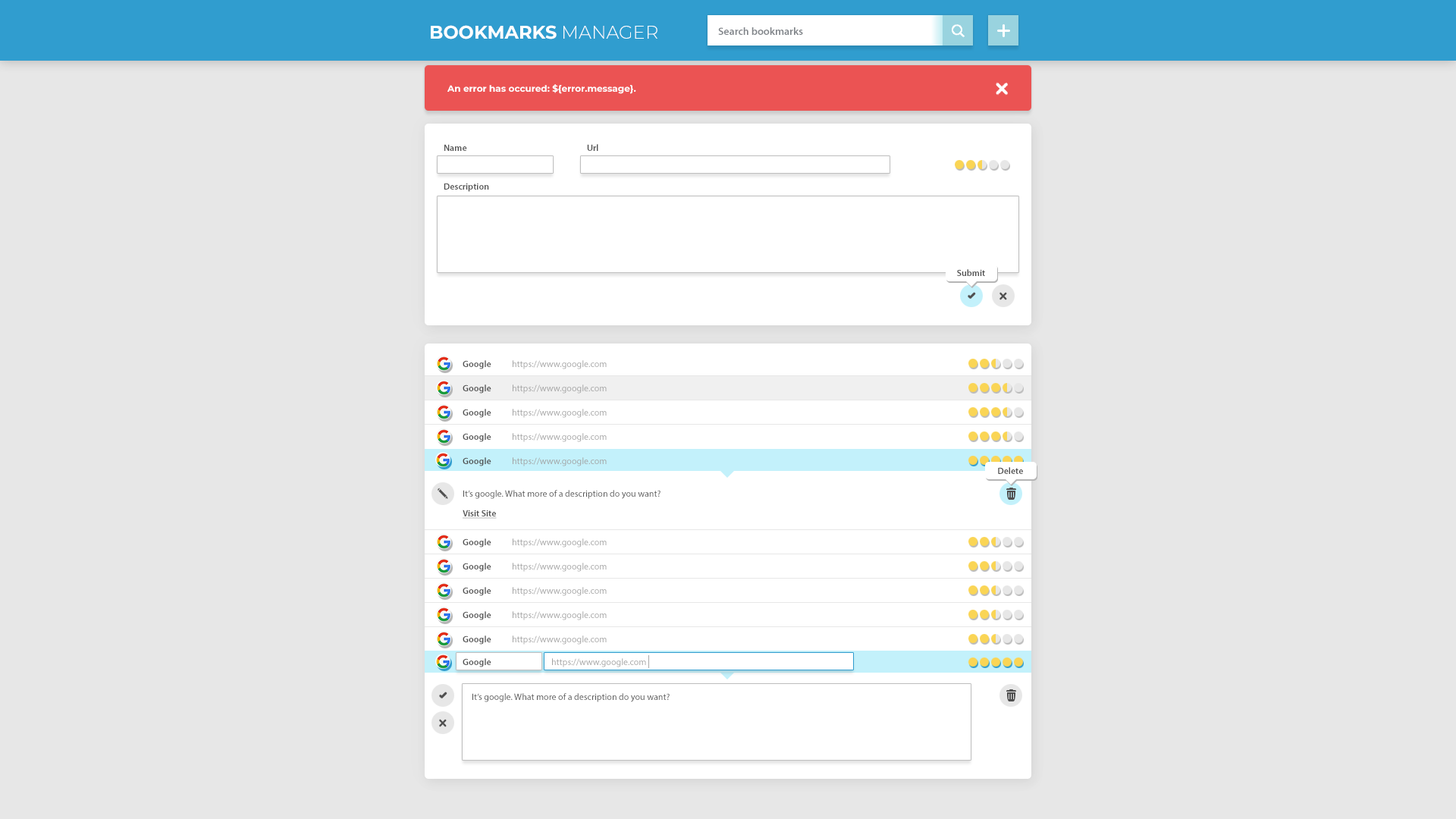
<style>
.page{position:relative;width:1456px;height:819px;background:#e7e7e7}
.page>*{position:absolute;margin:0}
.t1{font:18.2px "Montserrat-Bold";color:#ffffff;text-transform:uppercase}
.t2{font:18.2px "Montserrat-Light";color:#ffffff;text-transform:uppercase}
.t3{font:10.6px "MyriadPro-Semibold";color:#81858a}
.t4{font:9.1px "Montserrat-Bold";color:#ffffff}
.t5{font:9.1px "MyriadPro-Semibold";color:#4f4f4f}
.t6{font:9.1px "MyriadPro-Regular";color:#a2a2a2}
.t7{font:9.1px/19.7px "MyriadPro-Regular";color:#4f4f4f}
.t8{font:9.1px/19.7px "MyriadPro-Semibold";color:#4f4f4f;text-decoration:underline}
.t9{font:9.1px "MyriadPro-Regular";color:#4f4f4f}
</style>
<div class="page">
<p class="t1" style="left:431px;top:25px;width:226px;height:14px">Bookmarks <span class="t2">Manager</span></p>
<p class="t3" style="left:718px;top:27px;width:85px;height:8px">Search bookmarks</p>
<p class="t4" style="left:447px;top:84px;width:189px;height:10px">An error has occured: ${error.message}.</p>
<p class="t5" style="left:444px;top:144px;width:23px;height:7px">Name</p>
<p class="t5" style="left:587px;top:144px;width:11px;height:7px">Url</p>
<p class="t5" style="left:444px;top:183px;width:45px;height:9px">Description</p>
<p class="t5" style="left:957px;top:269px;width:28px;height:7px">Submit</p>
<p class="t5" style="left:463px;top:360px;width:28px;height:9px">Google</p>
<p class="t6" style="left:513px;top:360px;width:94px;height:9px">https://www.google.com</p>
<p class="t5" style="left:463px;top:384px;width:28px;height:10px">Google</p>
<p class="t6" style="left:513px;top:384px;width:94px;height:10px">https://www.google.com</p>
<p class="t5" style="left:463px;top:409px;width:28px;height:9px">Google</p>
<p class="t6" style="left:513px;top:409px;width:94px;height:9px">https://www.google.com</p>
<p class="t5" style="left:463px;top:433px;width:28px;height:9px">Google</p>
<p class="t6" style="left:513px;top:433px;width:94px;height:9px">https://www.google.com</p>
<p class="t5" style="left:463px;top:457px;width:28px;height:9px">Google</p>
<p class="t6" style="left:513px;top:457px;width:94px;height:9px">https://www.google.com</p>
<p class="t5" style="left:998px;top:467px;width:25px;height:7px">Delete</p>
<p class="t7" style="left:463px;top:490px;width:197px;height:29px">It’s google. What more of a description do you want?<br><span class="t8">Visit Site</span></p>
<p class="t5" style="left:463px;top:538px;width:28px;height:10px">Google</p>
<p class="t6" style="left:513px;top:538px;width:94px;height:10px">https://www.google.com</p>
<p class="t5" style="left:463px;top:563px;width:28px;height:9px">Google</p>
<p class="t6" style="left:513px;top:563px;width:94px;height:9px">https://www.google.com</p>
<p class="t5" style="left:463px;top:587px;width:28px;height:9px">Google</p>
<p class="t6" style="left:513px;top:587px;width:94px;height:9px">https://www.google.com</p>
<p class="t5" style="left:463px;top:611px;width:28px;height:9px">Google</p>
<p class="t6" style="left:513px;top:611px;width:94px;height:9px">https://www.google.com</p>
<p class="t5" style="left:463px;top:635px;width:28px;height:10px">Google</p>
<p class="t6" style="left:513px;top:635px;width:94px;height:10px">https://www.google.com</p>
<p class="t5" style="left:463px;top:658px;width:28px;height:9px">Google</p>
<p class="t6" style="left:552px;top:658px;width:94px;height:9px">https://www.google.com</p>
<p class="t9" style="left:472px;top:693px;width:198px;height:9px">It’s google. What more of a description do you want?</p>
</div>
